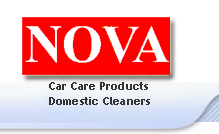
<style>
.page{position:relative;width:219px;height:134px;background:#ffffff}
.page>*{position:absolute;margin:0}
.t1{font:11.2px "TrebuchetMS-Bold";letter-spacing:0.02em;color:#333333}
</style>
<div class="page">
<p class="t1" style="left:49px;top:82px;width:99px;height:8px">Car Care Products</p>
<p class="t1" style="left:49px;top:97px;width:101px;height:8px">Domestic Cleaners</p>
</div>
